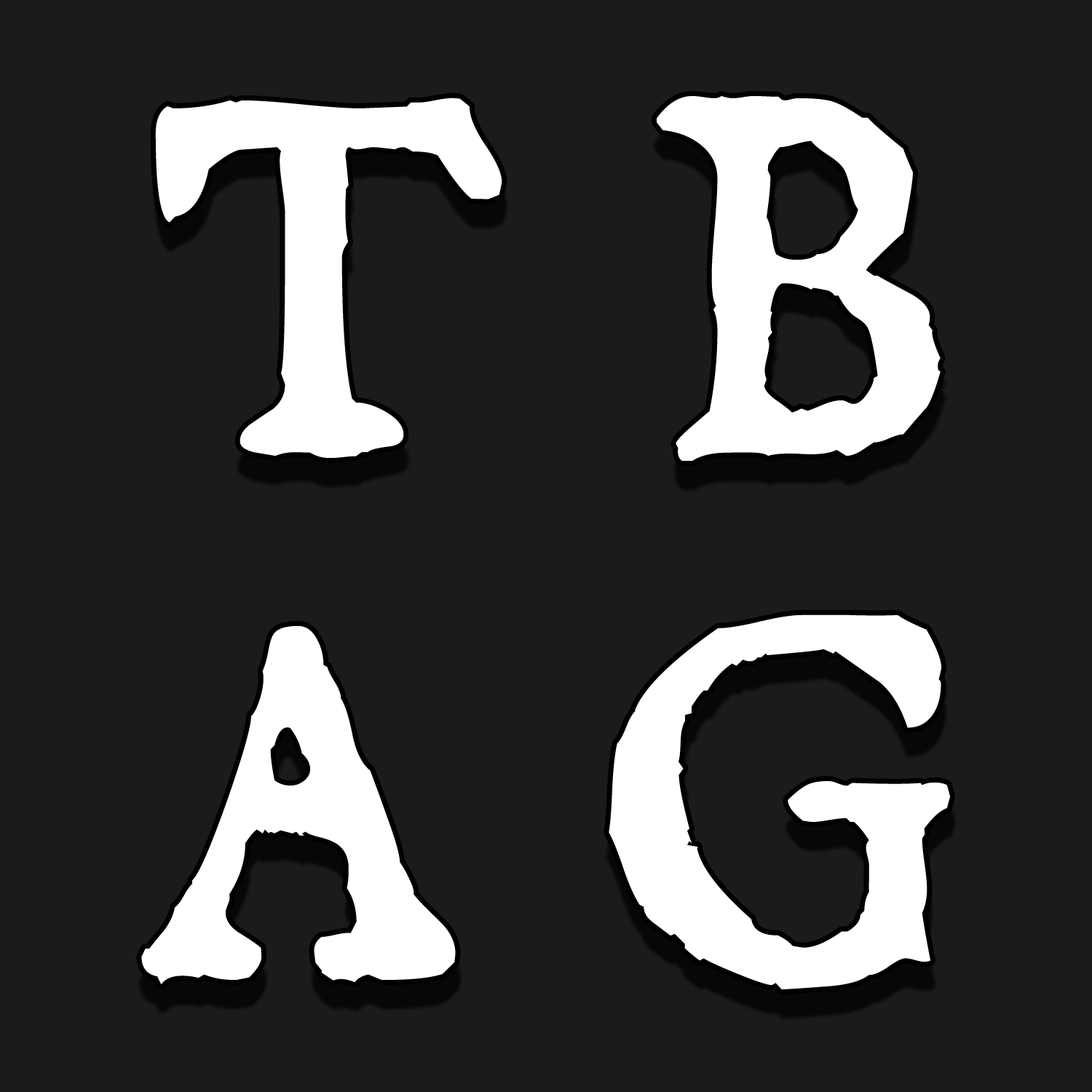
<style>
.page{position:relative;width:1092px;height:1092px;background:#1b1b1b}
.page>*{position:absolute;margin:0}
.t1{font:436.8px "DominicanSmallCaps";color:#ffffff}
</style>
<div class="page">
<p class="t1" style="left:141px;top:95px;width:809px;height:894px;text-align:center">T B<br>A G</p>
</div>
